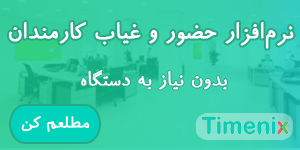
<style>
.page{position:relative;width:300px;height:150px}
.page>*{position:absolute;margin:0}
.t1{font:26px "BRoya";color:#ffffff;font-weight:bold}
.t2{font:22px "BRoya";color:#ffffff;font-weight:bold}
.t3{font:15px "IranianSans";color:#ffffff;font-weight:bold}
</style>
<div class="page">
<p class="t1" style="left:8px;top:22px;width:286px;height:27px">نرم‌افزار حضور و غیاب کارمندان</p>
<p class="t2" style="left:81px;top:70px;width:146px;height:20px">بدون نیاز به دستگاه</p>
<p class="t3" style="left:21px;top:116px;width:69px;height:17px">مطلعم کن</p>
</div>
